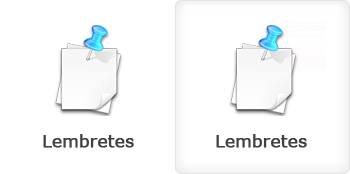
<style>
.page{position:relative;width:350px;height:174px;background:#ffffff}
.page>*{position:absolute;margin:0}
.t1{font:16.7px "Verdana";color:#404040;font-weight:bold}
</style>
<div class="page">
<p class="t1" style="left:43px;top:134px;width:91px;height:14px">Lembretes</p>
<p class="t1" style="left:216px;top:134px;width:91px;height:14px">Lembretes</p>
</div>
